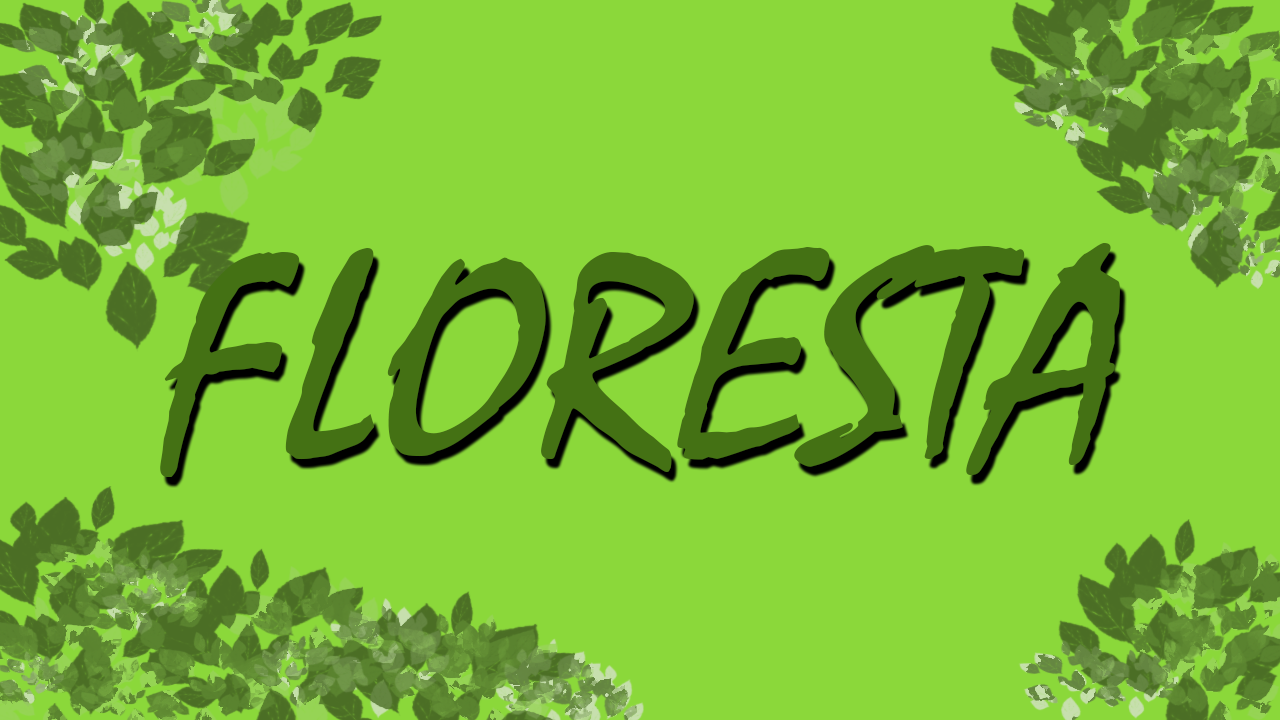
<style>
.page{position:relative;width:1280px;height:720px;background:#8bd83a}
.page>*{position:absolute;margin:0}
.t1{font:300px "Mistral";color:#447114;font-style:italic}
</style>
<div class="page">
<p class="t1" style="left:160px;top:243px;width:960px;height:234px">FLORESTA</p>
</div>
